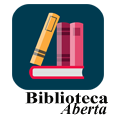
<style>
.page{position:relative;width:118px;height:118px;background:#ffffff}
.page>*{position:absolute;margin:0}
.t1{font:25px "AngsanaNew-Bold";color:#070706;scale:1.18 1}
.t2{font:25px "AngsanaNew-BoldItalic";color:#070706}
</style>
<div class="page">
<p class="t1" style="left:25px;top:91px;width:83px;height:13px">Biblioteca</p>
<p class="t2" style="left:60px;top:102px;width:47px;height:13px">Aberta</p>
</div>
